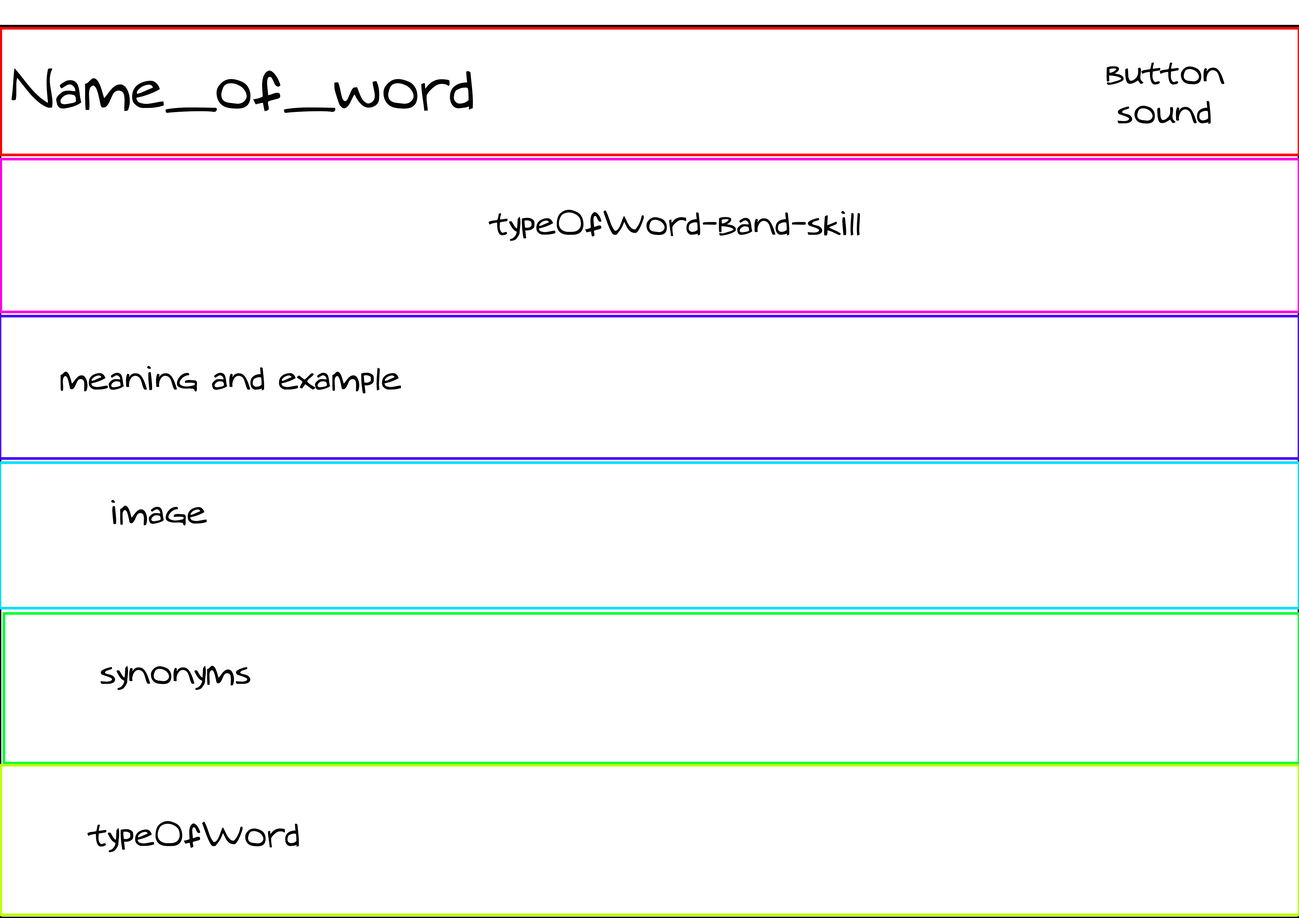
<style>
.page{position:relative;width:1299px;height:918px;background:#ffffff}
.page>*{position:absolute;margin:0}
.t1{font:32.7px "MTOaugie-Regular";color:#020202}
.t2{font:54.5px "MTOaugie-Regular";color:#020202}
</style>
<div class="page">
<p class="t1" style="left:1106px;top:63px;width:118px;height:61px;text-align:center">button sound</p>
<p class="t2" style="left:11px;top:68px;width:462px;height:45px">Name_of_word</p>
<p class="t1" style="left:488px;top:210px;width:372px;height:31px">typeOfWord-band-skill</p>
<p class="t1" style="left:60px;top:366px;width:341px;height:28px">meaning and example</p>
<p class="t1" style="left:111px;top:500px;width:96px;height:26px">image</p>
<p class="t1" style="left:101px;top:666px;width:150px;height:24px">synonyms</p>
<p class="t1" style="left:87px;top:821px;width:212px;height:32px">typeOfWord</p>
</div>
